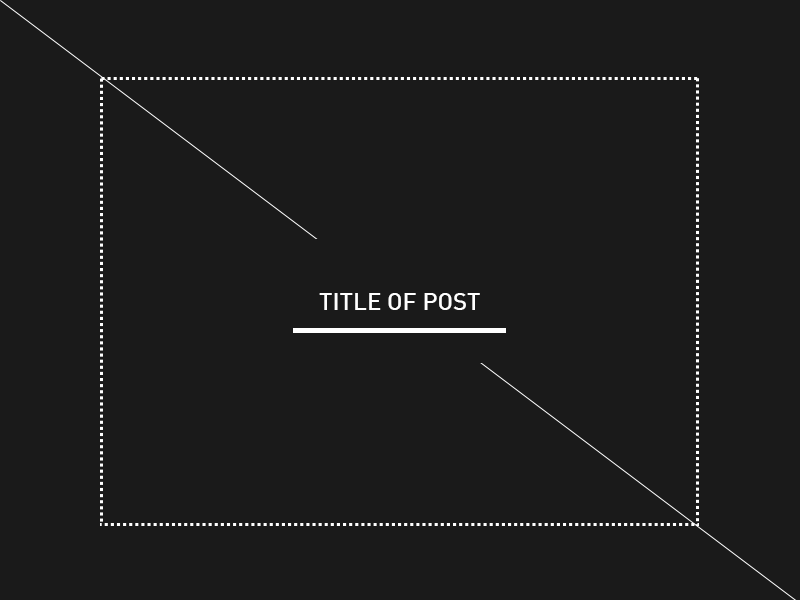
<style>
.page{position:relative;width:800px;height:600px;background:#1a1a1a}
.page>*{position:absolute;margin:0}
.t1{font:24px "DIN-Medi";color:#ffffff;text-transform:uppercase}
</style>
<div class="page">
<p class="t1" style="left:319px;top:293px;width:161px;height:17px">Title of Post</p>
</div>
